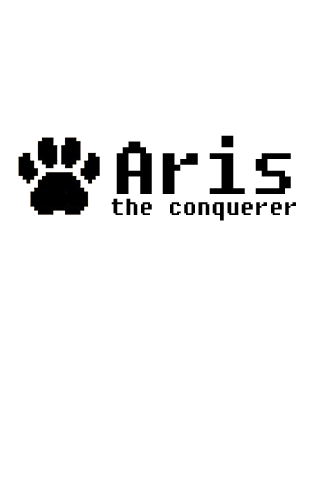
<style>
.page{position:relative;width:320px;height:480px;background:#ffffff}
.page>*{position:absolute;margin:0}
.t1{font:23.1px/21.3px "Fixedsys";color:#000000}
.t2{font:74.6px/32px "Fixedsys";color:#000000}
</style>
<div class="page">
<p class="t1" style="left:111px;top:135px;width:185px;height:86px;text-align:center"><span class="t2">Aris<br></span>the conquerer</p>
</div>
